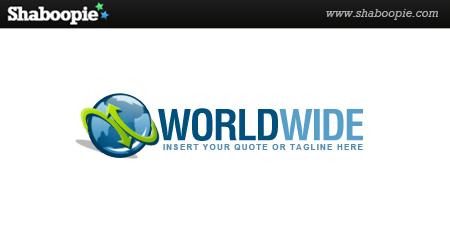
<style>
.page{position:relative;width:450px;height:250px;background:#ffffff}
.page>*{position:absolute;margin:0}
.t1{font:41.7px "Helvetica-Condensed-Bold";letter-spacing:-0.05em;color:#00507e}
.t2{font:41.7px "Helvetica-Condensed-Bold";letter-spacing:-0.05em;color:#569fc8}
.t3{font:8.3px "Arial-BoldMT";letter-spacing:0.12em;color:#528eb0}
</style>
<div class="page">
<p class="t1" style="left:158px;top:108px;width:205px;height:33px">WORLD<span class="t2">WIDE</span></p>
<p class="t3" style="left:163px;top:144px;width:200px;height:6px">INSERT YOUR QUOTE OR TAGLINE HERE</p>
</div>
